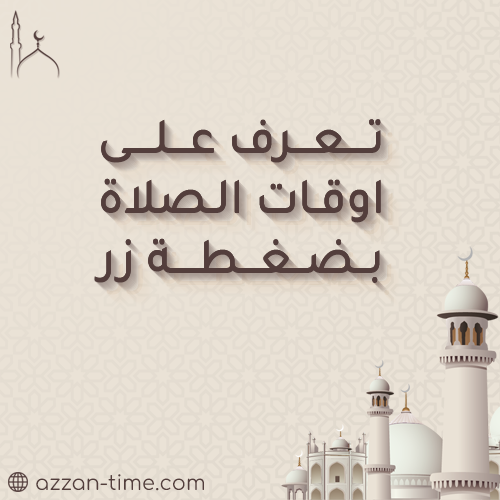
<style>
.page{position:relative;width:500px;height:500px;background:#eae2d6}
.page>*{position:absolute;margin:0}
.t1{font:50px "Tajawal-Medium";color:#533e3c}
.t2{font:50px "Tajawal-Medium"}
.t3{font:20.8px "Comfortaa-Regular";color:#533e3c}
</style>
<div class="page">
<p class="t1" style="left:94px;top:119px;width:287px;height:163px;text-align:center">تــــعـــرف عـــلــــى<br>اوقـات الـصلاة<br>بــضــغـــطــــة زر</p>
<p class="t1" style="left:94px;top:119px;width:287px;height:163px;text-align:center">تــــعـــرف عـــلــــى<br>اوقـات الـصلاة<br>بــضــغـــطــــة زر</p>
<p class="t1" style="left:94px;top:120px;width:287px;height:163px;text-align:center">تــــعـــرف عـــلــــى<br>اوقـات الـصلاة<br>بــضــغـــطــــة زر</p>
<p class="t1" style="left:95px;top:121px;width:287px;height:163px;text-align:center">تــــعـــرف عـــلــــى<br>اوقـات الـصلاة<br>بــضــغـــطــــة زر</p>
<p class="t2" style="left:96px;top:122px;width:287px;height:163px;text-align:center">تــــعـــرف عـــلــــى<br>اوقـات الـصلاة<br>بــضــغـــطــــة زر</p>
<p class="t2" style="left:97px;top:123px;width:287px;height:163px;text-align:center">تــــعـــرف عـــلــــى<br>اوقـات الـصلاة<br>بــضــغـــطــــة زر</p>
<p class="t3" style="left:36px;top:474px;width:168px;height:17px">azzan-time.com</p>
</div>
